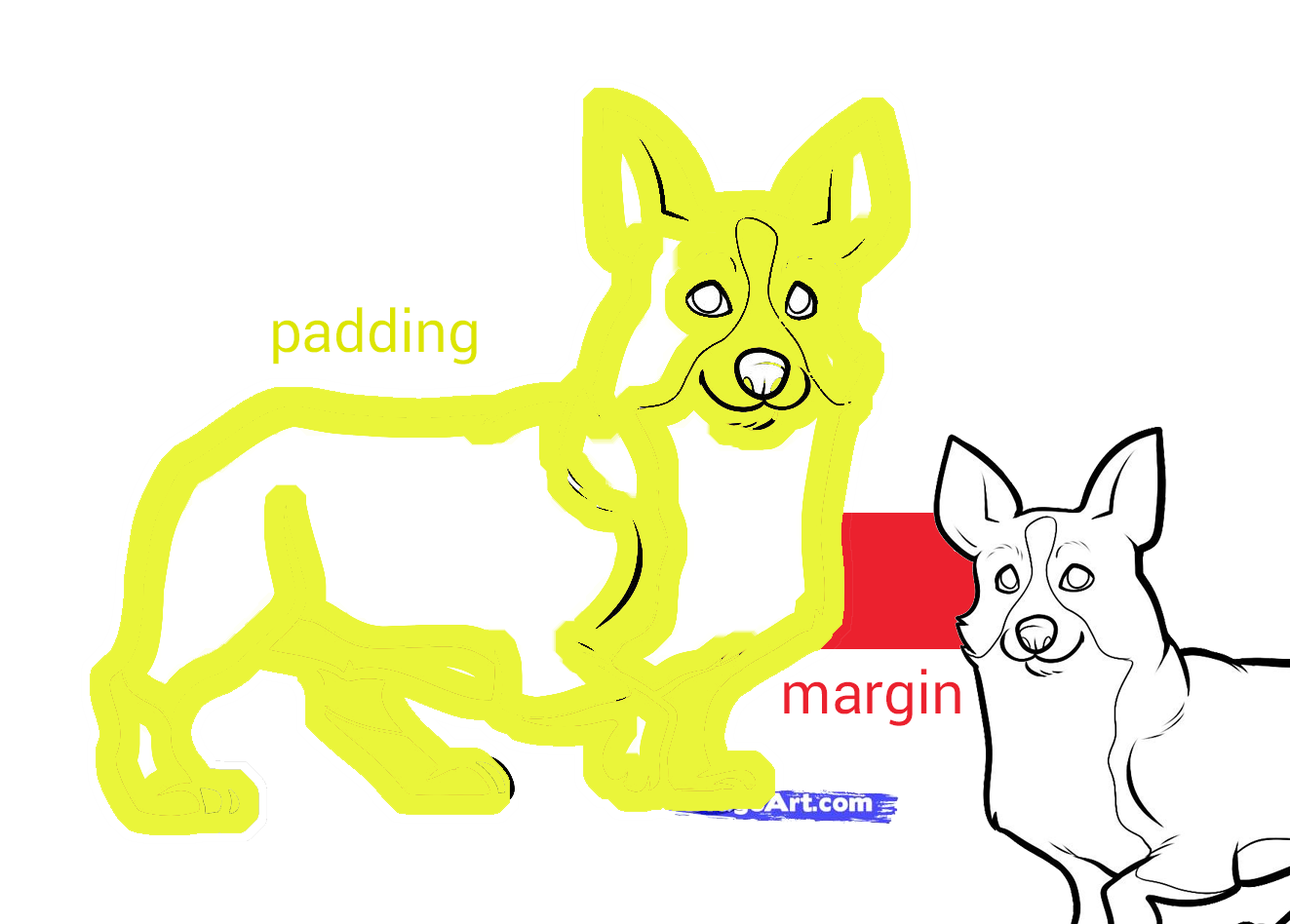
<style>
.page{position:relative;width:1290px;height:924px;background:#ffffff}
.page>*{position:absolute;margin:0}
.t1{font:58.5px "Roboto-Regular";color:#dde500}
.t2{font:58.5px "Roboto-Regular";color:#eb212e}
</style>
<div class="page">
<p class="t1" style="left:273px;top:307px;width:204px;height:58px">padding</p>
<p class="t2" style="left:784px;top:669px;width:176px;height:57px">margin</p>
</div>
